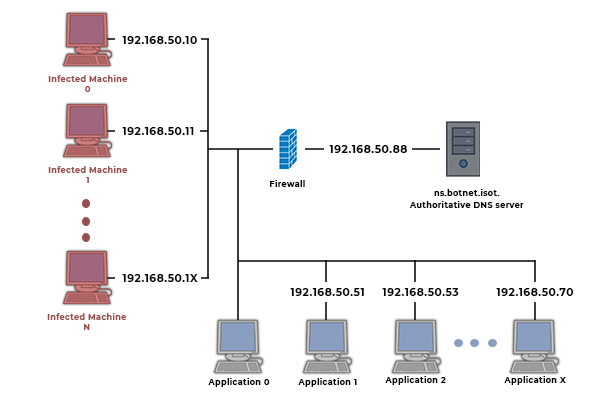
<style>
.page{position:relative;width:610px;height:406px;background:#ffffff}
.page>*{position:absolute;margin:0}
.t1{font:10.7px "Montserrat-Bold";letter-spacing:0.05em;color:#000000}
.t2{font:8px/10.7px "Montserrat-Bold";letter-spacing:0.05em;color:#994e4e}
.t3{font:8px "Montserrat-Bold";letter-spacing:0.05em;color:#000000}
.t4{font:8px/12px "Montserrat-Bold";letter-spacing:0.05em;color:#000000}
</style>
<div class="page">
<p class="t1" style="left:122px;top:36px;width:75px;height:8px">192.168.50.10</p>
<p class="t2" style="left:48px;top:75px;width:80px;height:17px;text-align:center">Infected Machine<br>0</p>
<p class="t1" style="left:122px;top:127px;width:72px;height:8px">192.168.50.11</p>
<p class="t1" style="left:329px;top:145px;width:78px;height:8px">192.168.50.88</p>
<p class="t2" style="left:48px;top:166px;width:80px;height:17px;text-align:center">Infected Machine<br>1</p>
<p class="t3" style="left:270px;top:180px;width:35px;height:7px">Firewall</p>
<p class="t4" style="left:409px;top:189px;width:115px;height:19px;text-align:center">ns.botnet.isot.<br>Authoritative DNS server</p>
<p class="t1" style="left:122px;top:274px;width:76px;height:8px">192.168.50.1X</p>
<p class="t1" style="left:290px;top:288px;width:74px;height:8px">192.168.50.51</p>
<p class="t1" style="left:382px;top:288px;width:77px;height:8px">192.168.50.53</p>
<p class="t1" style="left:496px;top:288px;width:78px;height:8px">192.168.50.70</p>
<p class="t2" style="left:47px;top:313px;width:80px;height:17px;text-align:center">Infected Machine<br>N</p>
<p class="t3" style="left:385px;top:376px;width:61px;height:9px">Application 2</p>
<p class="t3" style="left:504px;top:376px;width:62px;height:9px">Application X</p>
<p class="t3" style="left:208px;top:378px;width:62px;height:9px">Application 0</p>
<p class="t3" style="left:298px;top:378px;width:59px;height:9px">Application 1</p>
</div>
